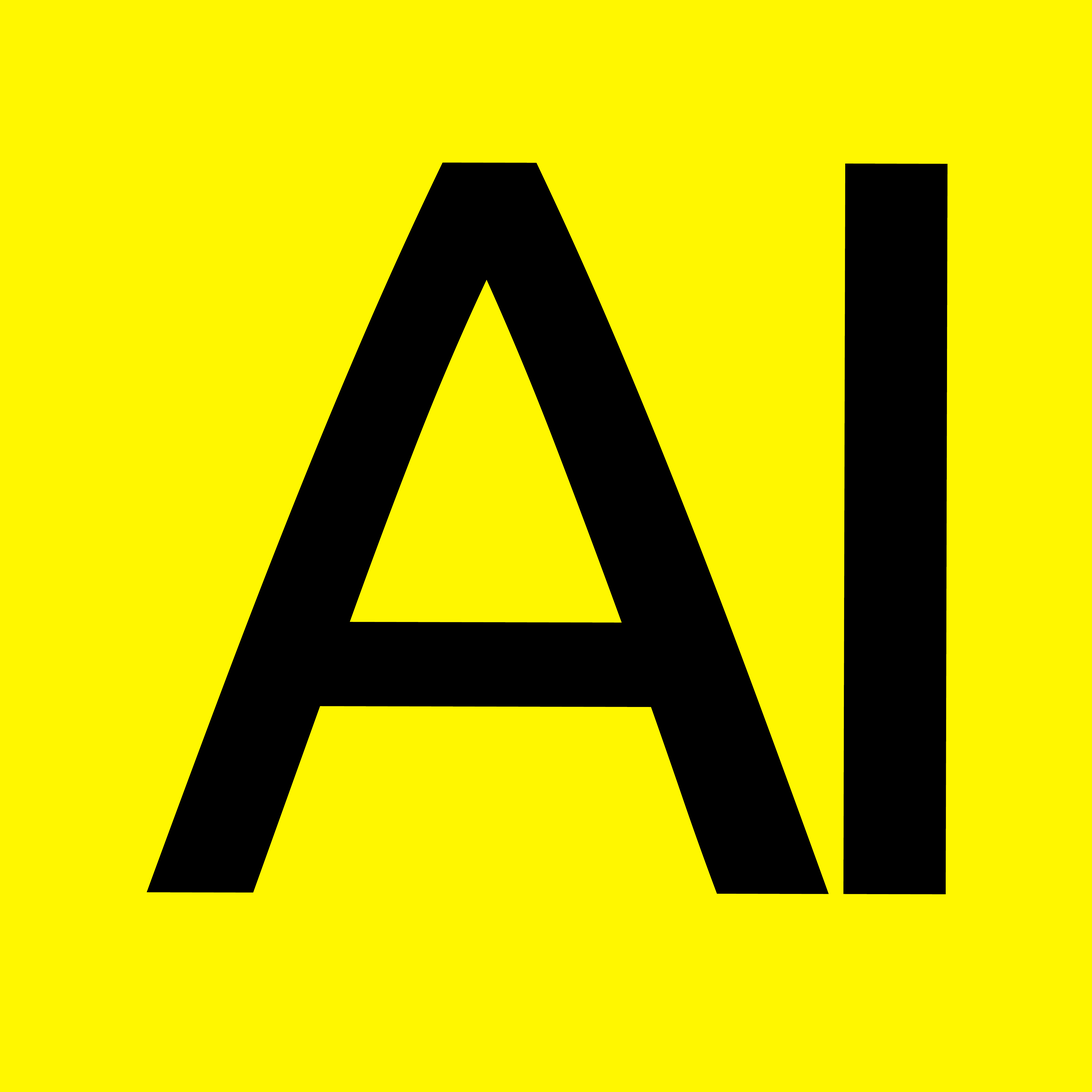
<style>
.page{position:relative;width:1092px;height:1092px;background:#fff700}
.page>*{position:absolute;margin:0}
.t1{font:1054px "Ubuntu-Regular";letter-spacing:-0.08em;color:#000000}
</style>
<div class="page">
<p class="t1" style="left:147px;top:162px;width:801px;height:732px">AI</p>
</div>
